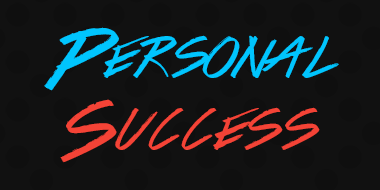
<style>
.page{position:relative;width:380px;height:190px;background:#111111}
.page>*{position:absolute;margin:0}
.t1{font:60px "ColorsOfAutumn";color:#00c5fe}
.t2{font:60px "ColorsOfAutumn";color:#f44336}
</style>
<div class="page">
<p class="t1" style="left:44px;top:27px;width:295px;height:136px;text-align:center">Personal<br><span class="t2">Success</span></p>
</div>
